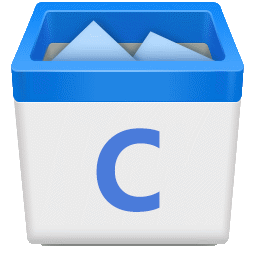
<style>
.page{position:relative;width:256px;height:256px;background:#eaeaea}
.page>*{position:absolute;margin:0}
.t1{font:106.7px "MicrosoftYaHei-Bold";color:#4a7bda}
</style>
<div class="page">
<p class="t1" style="left:96px;top:128px;width:64px;height:84px">C</p>
</div>
